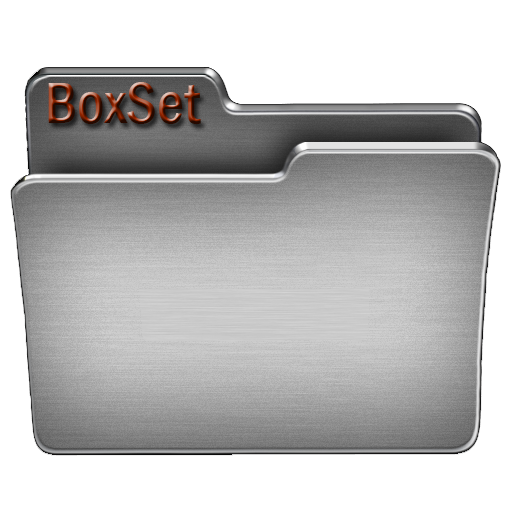
<style>
.page{position:relative;width:512px;height:512px;background:#ffffff}
.page>*{position:absolute;margin:0}
.t1{font:60px "FranklinGothic-MediumCond"}
</style>
<div class="page">
<p class="t1" style="left:48px;top:82px;width:153px;height:42px">BoxSet</p>
</div>
